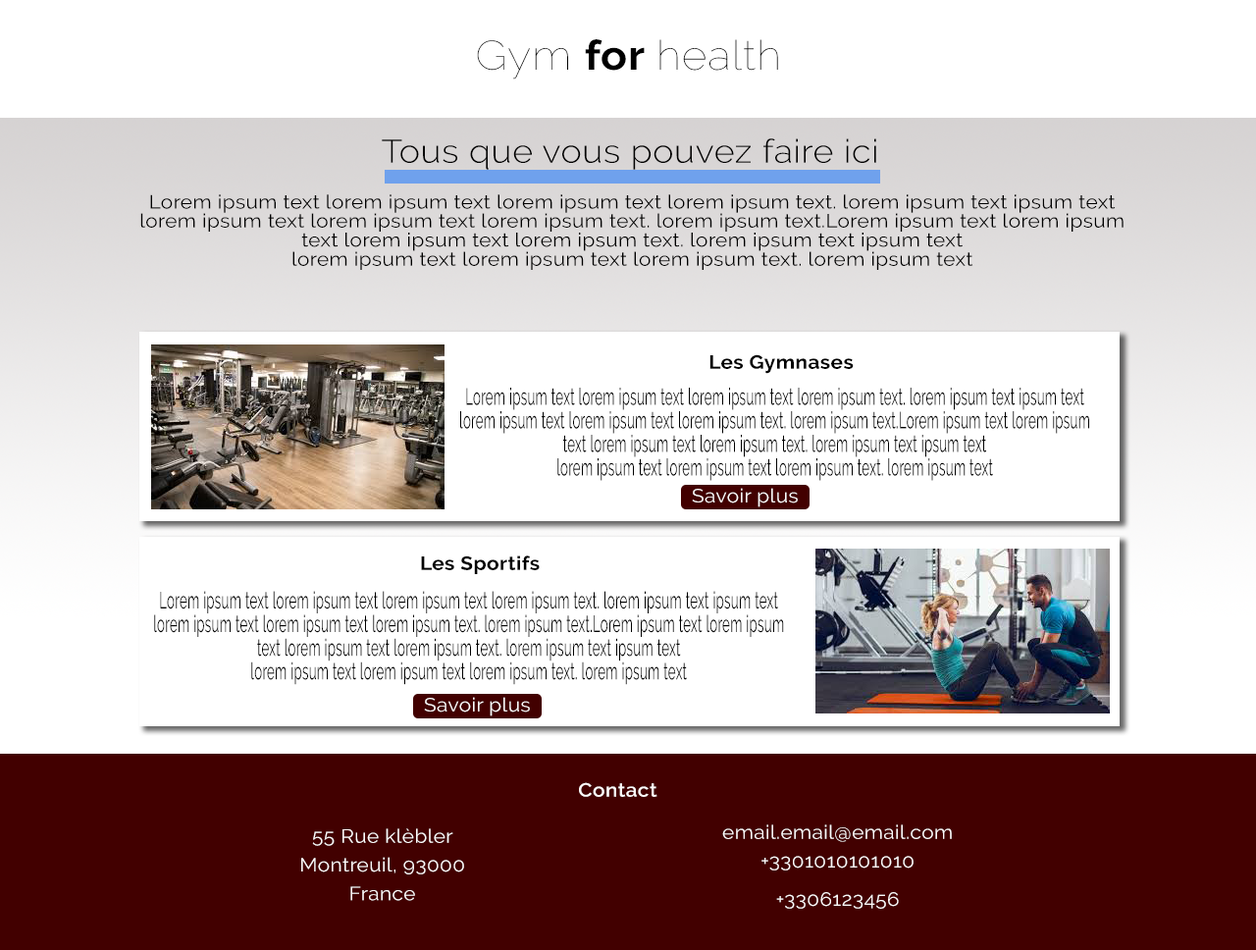
<style>
.page{position:relative;width:1256px;height:950px;background:#ffffff}
.page>*{position:absolute;margin:0}
.t1{font:40.9px "Raleway-Thin";letter-spacing:0.02em;color:#000000;scale:1.07 1}
.t2{font:40.9px "Raleway-Bold";letter-spacing:0.02em;color:#000000;scale:1.07 1}
.t3{font:32.7px "Raleway-Light";letter-spacing:0.02em;color:#000000;scale:1.07 1}
.t4{font:19.1px/9.5px "Raleway-Regular";letter-spacing:0.02em;color:#000000;scale:1.07 1}
.t5{font:19.1px "Raleway-Bold";letter-spacing:0.02em;color:#000000;scale:1.07 1}
.t6{font:23.6px/11.8px "Raleway-Regular";letter-spacing:0.02em;color:#000000;scale:0.55 1}
.t7{font:19.1px "Raleway-Regular";letter-spacing:0.02em;color:#fcfbfb;scale:1.07 1}
.t8{font:19.1px "Raleway-SemiBold";letter-spacing:0.02em;color:#fdfafa;scale:1.07 1}
.t9{font:19.1px/9.5px "Raleway-Regular";letter-spacing:0.02em;color:#fdfafa;scale:1.07 1}
</style>
<div class="page">
<p class="t1" style="left:477px;top:39px;width:301px;height:40px">Gym <span class="t2">for </span>health</p>
<p class="t3" style="left:382px;top:138px;width:494px;height:32px">Tous que vous pouvez faire ici</p>
<p class="t4" style="left:140px;top:194px;width:983px;height:76px;text-align:center">Lorem ipsum text lorem ipsum text lorem ipsum text lorem ipsum text. lorem ipsum text ipsum text <br><br>lorem ipsum text lorem ipsum text lorem ipsum text. lorem ipsum text.Lorem ipsum text lorem ipsum <br><br>text lorem ipsum text lorem ipsum text. lorem ipsum text ipsum text <br><br>lorem ipsum text lorem ipsum text lorem ipsum text. lorem ipsum text</p>
<p class="t5" style="left:709px;top:354px;width:144px;height:20px">Les Gymnases</p>
<p class="t6" style="left:460px;top:387px;width:629px;height:94px;text-align:center">Lorem ipsum text lorem ipsum text lorem ipsum text lorem ipsum text. lorem ipsum text ipsum text <br><br>lorem ipsum text lorem ipsum text lorem ipsum text. lorem ipsum text.Lorem ipsum text lorem ipsum <br><br>text lorem ipsum text lorem ipsum text. lorem ipsum text ipsum text <br><br>lorem ipsum text lorem ipsum text lorem ipsum text. lorem ipsum text</p>
<p class="t7" style="left:692px;top:488px;width:106px;height:19px">Savoir plus</p>
<p class="t5" style="left:421px;top:555px;width:119px;height:19px">Les Sportifs</p>
<p class="t6" style="left:154px;top:591px;width:630px;height:94px;text-align:center">Lorem ipsum text lorem ipsum text lorem ipsum text lorem ipsum text. lorem ipsum text ipsum text <br><br>lorem ipsum text lorem ipsum text lorem ipsum text. lorem ipsum text.Lorem ipsum text lorem ipsum <br><br>text lorem ipsum text lorem ipsum text. lorem ipsum text ipsum text <br><br>lorem ipsum text lorem ipsum text lorem ipsum text. lorem ipsum text</p>
<p class="t7" style="left:424px;top:697px;width:106px;height:19px">Savoir plus</p>
<p class="t8" style="left:579px;top:782px;width:78px;height:15px">Contact</p>
<p class="t9" style="left:301px;top:828px;width:163px;height:73px;text-align:center">55 Rue klèbler<br><br><br>Montreuil, 93000<br><br><br>France</p>
<p class="t9" style="left:722px;top:824px;width:230px;height:84px;text-align:center">email.email@email.com<br><br><br>+3301010101010<br><br><br><br>+3306123456</p>
</div>
